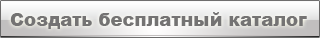
<style>
.page{position:relative;width:320px;height:38px}
.page>*{position:absolute;margin:0}
.t1{font:18px "Arial-Black";color:#747373}
</style>
<div class="page">
<p class="t1" style="left:10px;top:12px;width:297px;height:17px">Создать бесплатный каталог</p>
</div>
